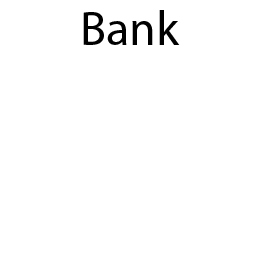
<style>
.page{position:relative;width:256px;height:256px;background:#ffffff}
.page>*{position:absolute;margin:0}
.t1{font:48px "MyriadPro-Regular";color:#000000}
</style>
<div class="page">
<p class="t1" style="left:83px;top:10px;width:97px;height:35px">Bank</p>
</div>
